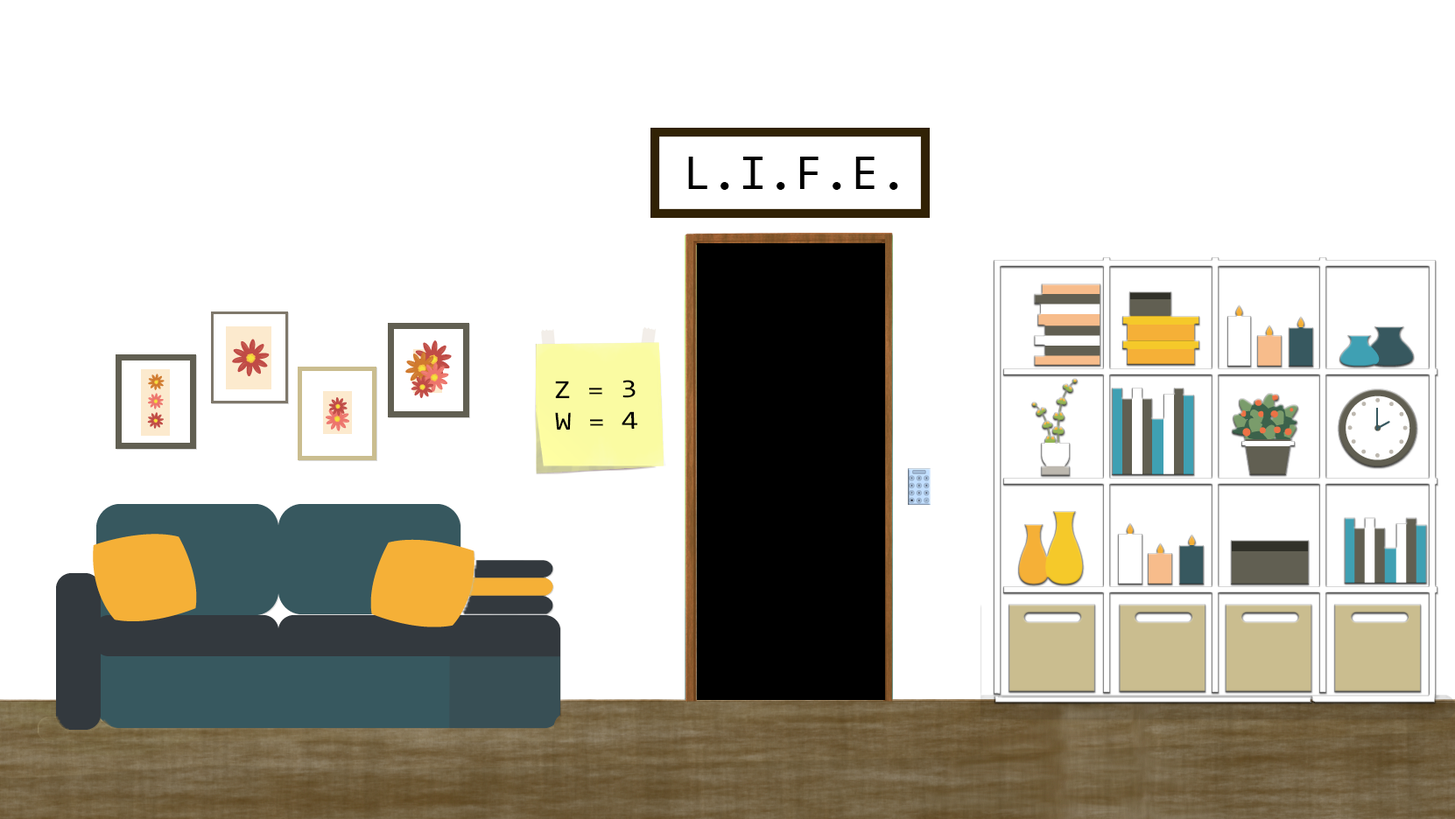
<style>
.page{position:relative;width:1455px;height:819px;background:#ffffff}
.page>*{position:absolute;margin:0}
.t1{font:51.1px "Consolas";color:#000000}
.t2{font:26.3px "Consolas";color:#000000;scale:1.16 1}
</style>
<div class="page">
<p class="t1" style="left:688px;top:157px;width:210px;height:33px">L.I.F.E.</p>
<p class="t2" style="left:555px;top:380px;width:82px;height:50px">Z = 3<br>W = 4</p>
</div>
